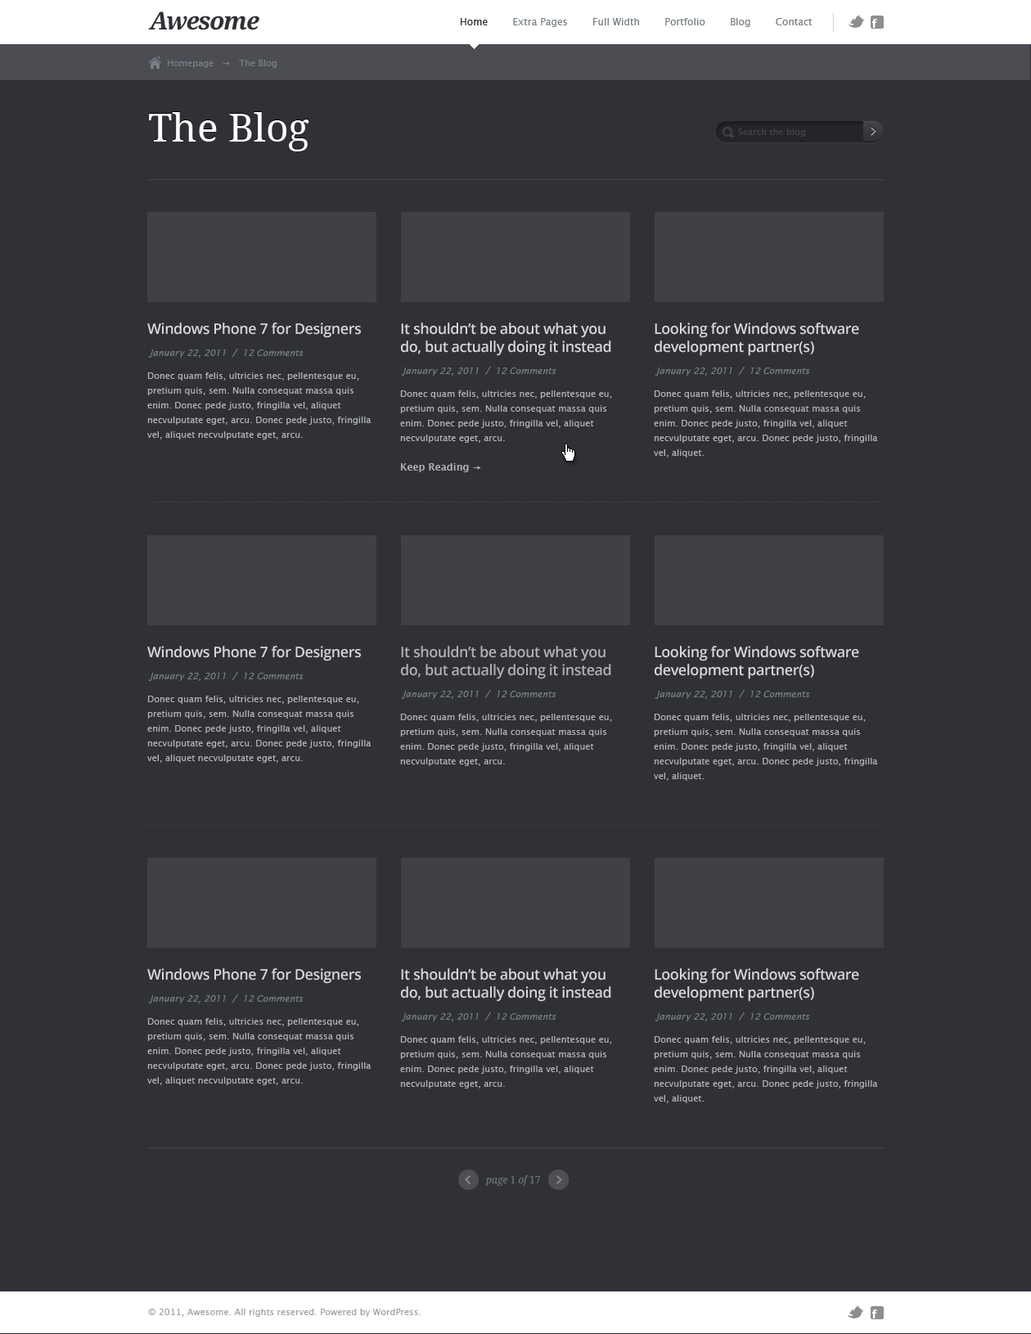
<style>
.page{position:relative;width:1031px;height:1334px;background:#2f3136}
.page>*{position:absolute;margin:0}
.t1{font:24.5px "DroidSerif-BoldItalic";letter-spacing:-0.05em;color:#2f3136}
.t2{font:9.8px "LucidaSans";color:#788188}
.t3{font:9.8px "LucidaSans";color:#2f3136}
.t4{font:9px "LucidaSans";color:#7a7e85}
.t5{font:39.3px "DroidSerif";color:#ffffff}
.t6{font:9px "LucidaSans";color:#424449}
.t7{font:14.7px "OpenSans-Semibold";letter-spacing:-0.025em;color:#d6d8dc}
.t8{font:14.7px/18px "OpenSans-Semibold";letter-spacing:-0.025em;color:#d6d8dc}
.t9{font:9px "LucidaSans-Italic";color:#7b7f84}
.t10{font:9px/14.7px "LucidaSans";color:#b1b2b6}
.t11{font:9.8px/14.7px "LucidaSans-Demi";color:#b1b2b6}
.t12{font:14.7px/18px "OpenSans-Semibold";letter-spacing:-0.025em;color:#b1b2b6}
.t13{font:9.8px "DroidSerif-Italic";color:#6d7176}
.t14{font:9.8px "DroidSerif";color:#6d7176}
.t15{font:9px "LucidaSans";color:#a2a2a2}
</style>
<div class="page">
<p class="t1" style="left:148px;top:11px;width:111px;height:19px">Awesome</p>
<p class="t2" style="left:461px;top:18px;width:351px;height:9px"><span class="t3">Home        </span>Extra Pages        Full Width        Portfolio        Blog        Contact</p>
<p class="t4" style="left:168px;top:60px;width:109px;height:8px">Homepage   →   The Blog</p>
<p class="t5" style="left:149px;top:112px;width:160px;height:39px">The Blog</p>
<p class="t6" style="left:738px;top:128px;width:67px;height:9px">Search the blog</p>
<p class="t7" style="left:147px;top:322px;width:214px;height:16px">Windows Phone 7 for Designers</p>
<p class="t8" style="left:401px;top:322px;width:210px;height:34px">It shouldn’t be about what you do, but actually doing it instead</p>
<p class="t8" style="left:655px;top:322px;width:204px;height:34px">Looking for Windows software development partner(s)</p>
<p class="t9" style="left:148px;top:349px;width:156px;height:9px">January 22, 2011  /  12 Comments</p>
<p class="t10" style="left:147px;top:372px;width:224px;height:67px">Donec quam felis, ultricies nec, pellentesque eu, pretium quis, sem. Nulla consequat massa quis enim. Donec pede justo, fringilla vel, aliquet necvulputate eget, arcu. Donec pede justo, fringilla vel, aliquet necvulputate eget, arcu.</p>
<p class="t9" style="left:401px;top:367px;width:155px;height:9px">January 22, 2011  /  12 Comments</p>
<p class="t9" style="left:655px;top:367px;width:155px;height:9px">January 22, 2011  /  12 Comments</p>
<p class="t10" style="left:400px;top:390px;width:212px;height:82px">Donec quam felis, ultricies nec, pellentesque eu, pretium quis, sem. Nulla consequat massa quis enim. Donec pede justo, fringilla vel, aliquet necvulputate eget, arcu.<br><br><span class="t11">Keep Reading →</span></p>
<p class="t10" style="left:654px;top:390px;width:224px;height:67px">Donec quam felis, ultricies nec, pellentesque eu, pretium quis, sem. Nulla consequat massa quis enim. Donec pede justo, fringilla vel, aliquet necvulputate eget, arcu. Donec pede justo, fringilla vel, aliquet.</p>
<p class="t7" style="left:147px;top:646px;width:214px;height:15px">Windows Phone 7 for Designers</p>
<p class="t12" style="left:401px;top:646px;width:210px;height:33px">It shouldn’t be about what you do, but actually doing it instead</p>
<p class="t8" style="left:655px;top:646px;width:204px;height:33px">Looking for Windows software development partner(s)</p>
<p class="t9" style="left:148px;top:672px;width:156px;height:9px">January 22, 2011  /  12 Comments</p>
<p class="t9" style="left:401px;top:690px;width:155px;height:9px">January 22, 2011  /  12 Comments</p>
<p class="t9" style="left:655px;top:690px;width:155px;height:9px">January 22, 2011  /  12 Comments</p>
<p class="t10" style="left:147px;top:695px;width:224px;height:68px">Donec quam felis, ultricies nec, pellentesque eu, pretium quis, sem. Nulla consequat massa quis enim. Donec pede justo, fringilla vel, aliquet necvulputate eget, arcu. Donec pede justo, fringilla vel, aliquet necvulputate eget, arcu.</p>
<p class="t10" style="left:400px;top:713px;width:212px;height:53px">Donec quam felis, ultricies nec, pellentesque eu, pretium quis, sem. Nulla consequat massa quis enim. Donec pede justo, fringilla vel, aliquet necvulputate eget, arcu.</p>
<p class="t10" style="left:654px;top:713px;width:224px;height:68px">Donec quam felis, ultricies nec, pellentesque eu, pretium quis, sem. Nulla consequat massa quis enim. Donec pede justo, fringilla vel, aliquet necvulputate eget, arcu. Donec pede justo, fringilla vel, aliquet.</p>
<p class="t7" style="left:147px;top:968px;width:214px;height:15px">Windows Phone 7 for Designers</p>
<p class="t8" style="left:401px;top:968px;width:210px;height:33px">It shouldn’t be about what you do, but actually doing it instead</p>
<p class="t8" style="left:655px;top:968px;width:204px;height:33px">Looking for Windows software development partner(s)</p>
<p class="t9" style="left:148px;top:994px;width:156px;height:9px">January 22, 2011  /  12 Comments</p>
<p class="t9" style="left:401px;top:1012px;width:155px;height:9px">January 22, 2011  /  12 Comments</p>
<p class="t9" style="left:655px;top:1012px;width:155px;height:9px">January 22, 2011  /  12 Comments</p>
<p class="t10" style="left:147px;top:1018px;width:224px;height:67px">Donec quam felis, ultricies nec, pellentesque eu, pretium quis, sem. Nulla consequat massa quis enim. Donec pede justo, fringilla vel, aliquet necvulputate eget, arcu. Donec pede justo, fringilla vel, aliquet necvulputate eget, arcu.</p>
<p class="t10" style="left:400px;top:1036px;width:212px;height:52px">Donec quam felis, ultricies nec, pellentesque eu, pretium quis, sem. Nulla consequat massa quis enim. Donec pede justo, fringilla vel, aliquet necvulputate eget, arcu.</p>
<p class="t10" style="left:654px;top:1036px;width:224px;height:67px">Donec quam felis, ultricies nec, pellentesque eu, pretium quis, sem. Nulla consequat massa quis enim. Donec pede justo, fringilla vel, aliquet necvulputate eget, arcu. Donec pede justo, fringilla vel, aliquet.</p>
<p class="t13" style="left:485px;top:1175px;width:55px;height:11px">page<span class="t14"> 1</span> of <span class="t14">17</span></p>
<p class="t15" style="left:148px;top:1308px;width:273px;height:8px">© 2011, Awesome. All rights reserved. Powered by WordPress.</p>
</div>
